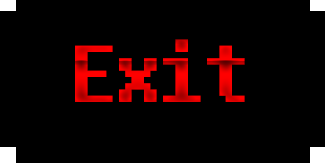
<style>
.page{position:relative;width:325px;height:163px;background:#000000}
.page>*{position:absolute;margin:0}
.t1{font:100px "8bitoperator-JVE"}
</style>
<div class="page">
<p class="t1" style="left:75px;top:39px;width:170px;height:63px">Exit</p>
</div>
